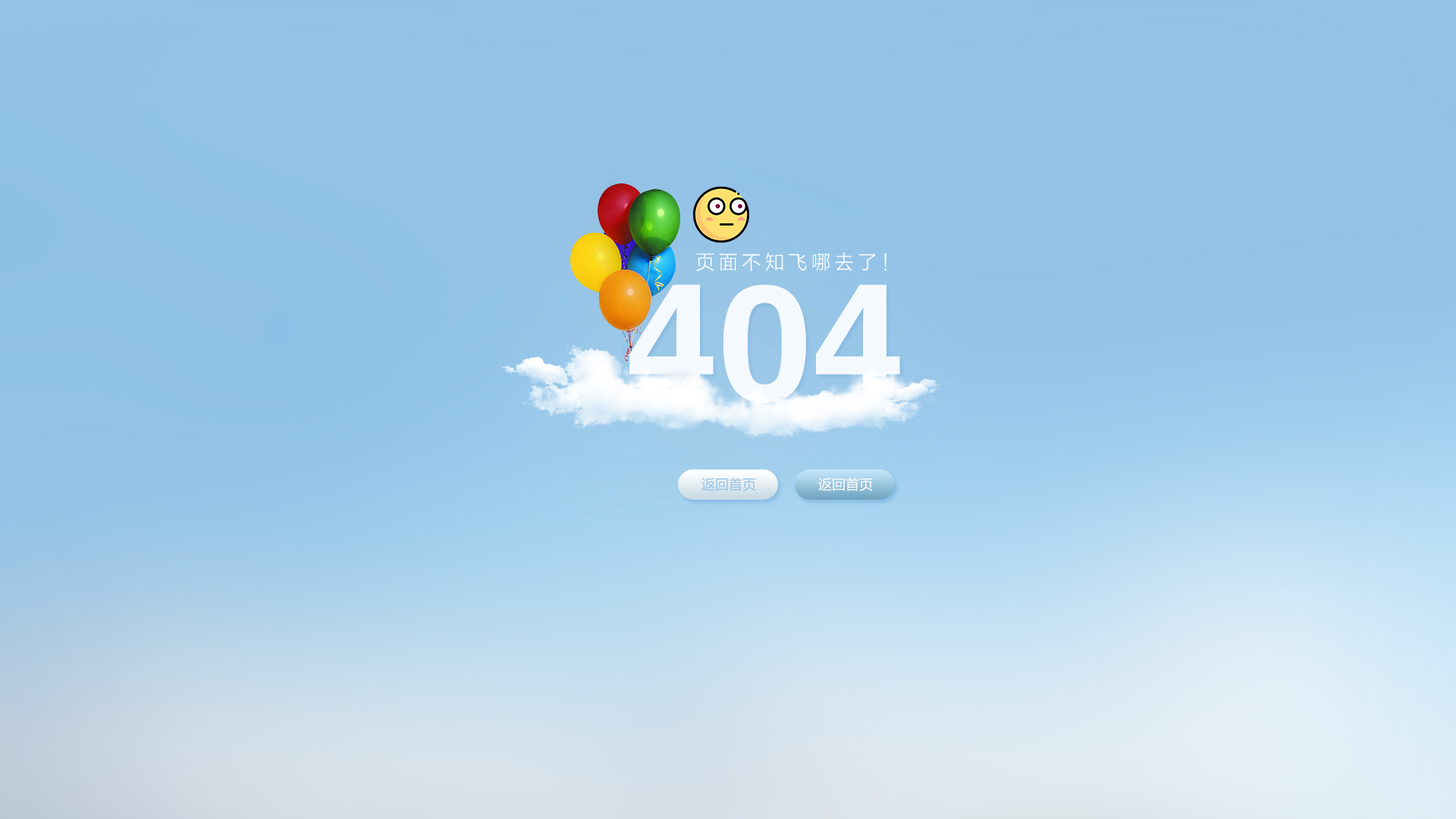
<style>
.page{position:relative;width:1456px;height:819px;background:#92c2e6}
.page>*{position:absolute;margin:0}
.t1{font:19.9px "FZLTXHK";letter-spacing:0.2em;color:#ffffff}
.t2{font:161.6px "CTCuHeiSJ";color:#f4f9fd;scale:1.04 1}
.t3{font:13.6px "MicrosoftYaHei";color:#91c1e7}
.t4{font:13.6px "MicrosoftYaHei";color:#ffffff}
</style>
<div class="page">
<p class="t1" style="left:696px;top:253px;width:190px;height:18px">页面不知飞哪去了！</p>
<p class="t2" style="left:629px;top:284px;width:271px;height:119px">404</p>
<p class="t3" style="left:701px;top:477px;width:55px;height:14px">返回首页</p>
<p class="t4" style="left:818px;top:477px;width:55px;height:14px">返回首页</p>
</div>
